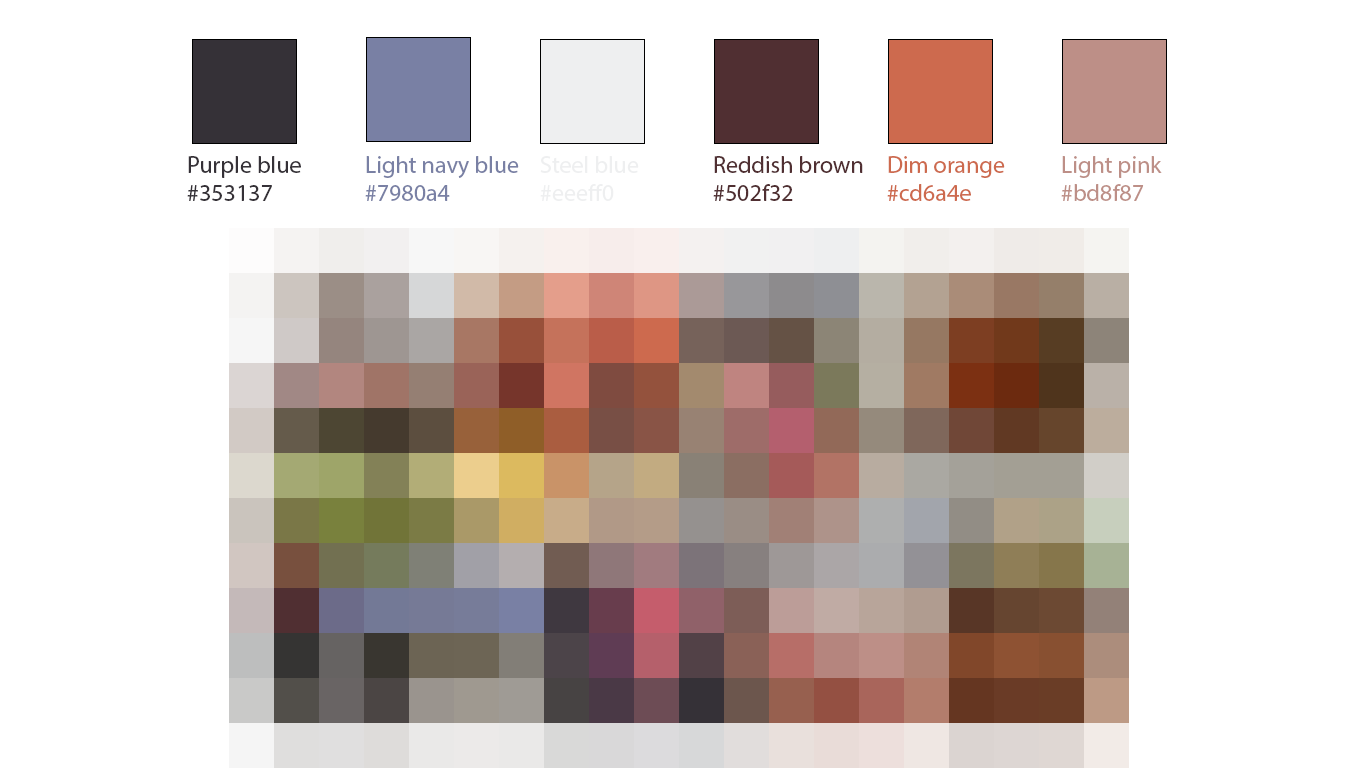
<style>
.page{position:relative;width:1366px;height:768px;background:#ffffff}
.page>*{position:absolute;margin:0}
.t1{font:24px "MyriadPro-Regular";color:#353137}
.t2{font:24px "MyriadPro-Regular";color:#7980a4}
.t3{font:24px "MyriadPro-Regular";color:#eeeff0}
.t4{font:24px "MyriadPro-Regular";color:#502f32}
.t5{font:24px "MyriadPro-Regular";color:#cd6a4e}
.t6{font:24px "MyriadPro-Regular";color:#bd8f87}
</style>
<div class="page">
<p class="t1" style="left:187px;top:156px;width:114px;height:45px">Purple blue<br>#353137</p>
<p class="t2" style="left:365px;top:156px;width:154px;height:45px">Light navy blue<br>#7980a4</p>
<p class="t3" style="left:540px;top:156px;width:99px;height:45px">Steel blue<br>#eeeff0</p>
<p class="t4" style="left:713px;top:156px;width:150px;height:45px">Reddish brown<br>#502f32</p>
<p class="t5" style="left:887px;top:156px;width:118px;height:45px">Dim orange<br>#cd6a4e</p>
<p class="t6" style="left:1061px;top:156px;width:101px;height:45px">Light pink<br>#bd8f87</p>
</div>
